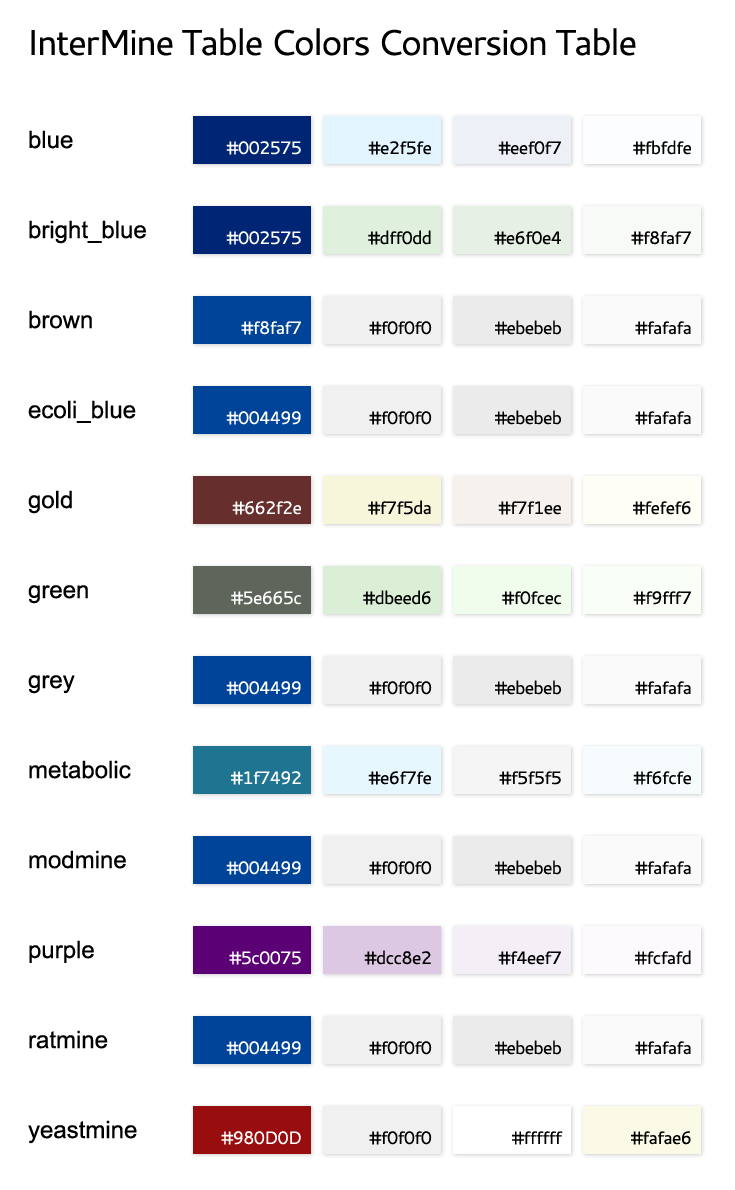
<style>
.page{position:relative;width:735px;height:1190px;background:#ffffff}
.page>*{position:absolute;margin:0}
.t1{font:36px "Cantarell-Regular";letter-spacing:-0.05em;color:#000000}
.t2{font:24px/30px "ArialMT";color:#000000}
.t3{font:18px "Cantarell-Regular";letter-spacing:-0.05em;color:#ffffff}
.t4{font:18px "Cantarell-Regular";letter-spacing:-0.05em;color:#000000}
</style>
<div class="page">
<p class="t1" style="left:31px;top:28px;width:605px;height:28px">InterMine Table Colors Conversion Table</p>
<p class="t2" style="left:28px;top:130px;width:118px;height:1014px">blue<br><br><br>bright_blue<br><br><br>brown<br><br><br>ecoli_blue<br><br><br>gold<br><br><br>green<br><br><br>grey<br><br><br>metabolic<br><br><br>modmine<br><br><br>purple<br><br><br>ratmine<br><br><br>yeastmine</p>
<p class="t3" style="left:226px;top:141px;width:75px;height:14px">#002575</p>
<p class="t4" style="left:368px;top:141px;width:63px;height:14px">#e2f5fe</p>
<p class="t4" style="left:498px;top:141px;width:63px;height:14px">#eef0f7</p>
<p class="t4" style="left:633px;top:140px;width:58px;height:15px">#fbfdfe</p>
<p class="t3" style="left:226px;top:231px;width:75px;height:14px">#002575</p>
<p class="t4" style="left:368px;top:230px;width:63px;height:15px">#dff0dd</p>
<p class="t4" style="left:494px;top:231px;width:67px;height:14px">#e6f0e4</p>
<p class="t4" style="left:631px;top:231px;width:60px;height:14px">#f8faf7</p>
<p class="t3" style="left:241px;top:321px;width:60px;height:14px">#f8faf7</p>
<p class="t4" style="left:369px;top:321px;width:63px;height:14px">#f0f0f0</p>
<p class="t4" style="left:495px;top:320px;width:66px;height:15px">#ebebeb</p>
<p class="t4" style="left:635px;top:321px;width:56px;height:14px">#fafafa</p>
<p class="t3" style="left:226px;top:411px;width:75px;height:14px">#004499</p>
<p class="t4" style="left:369px;top:411px;width:63px;height:14px">#f0f0f0</p>
<p class="t4" style="left:495px;top:410px;width:66px;height:15px">#ebebeb</p>
<p class="t4" style="left:635px;top:411px;width:56px;height:14px">#fafafa</p>
<p class="t3" style="left:232px;top:501px;width:69px;height:14px">#662f2e</p>
<p class="t4" style="left:368px;top:500px;width:63px;height:15px">#f7f5da</p>
<p class="t4" style="left:498px;top:501px;width:63px;height:14px">#f7f1ee</p>
<p class="t4" style="left:633px;top:501px;width:58px;height:14px">#fefef6</p>
<p class="t3" style="left:231px;top:591px;width:70px;height:14px">#5e665c</p>
<p class="t4" style="left:363px;top:590px;width:68px;height:15px">#dbeed6</p>
<p class="t4" style="left:502px;top:591px;width:59px;height:14px">#f0fcec</p>
<p class="t4" style="left:633px;top:591px;width:58px;height:14px">#f9fff7</p>
<p class="t3" style="left:226px;top:681px;width:75px;height:14px">#004499</p>
<p class="t4" style="left:369px;top:681px;width:63px;height:14px">#f0f0f0</p>
<p class="t4" style="left:495px;top:680px;width:66px;height:15px">#ebebeb</p>
<p class="t4" style="left:635px;top:681px;width:56px;height:14px">#fafafa</p>
<p class="t3" style="left:231px;top:771px;width:70px;height:14px">#1f7492</p>
<p class="t4" style="left:368px;top:771px;width:63px;height:14px">#e6f7fe</p>
<p class="t4" style="left:499px;top:771px;width:62px;height:14px">#f5f5f5</p>
<p class="t4" style="left:633px;top:771px;width:58px;height:14px">#f6fcfe</p>
<p class="t3" style="left:226px;top:861px;width:75px;height:14px">#004499</p>
<p class="t4" style="left:369px;top:861px;width:63px;height:14px">#f0f0f0</p>
<p class="t4" style="left:495px;top:860px;width:66px;height:15px">#ebebeb</p>
<p class="t4" style="left:635px;top:861px;width:56px;height:14px">#fafafa</p>
<p class="t3" style="left:229px;top:951px;width:72px;height:14px">#5c0075</p>
<p class="t4" style="left:364px;top:950px;width:67px;height:15px">#dcc8e2</p>
<p class="t4" style="left:498px;top:951px;width:63px;height:14px">#f4eef7</p>
<p class="t4" style="left:635px;top:950px;width:56px;height:15px">#fcfafd</p>
<p class="t3" style="left:226px;top:1041px;width:75px;height:14px">#004499</p>
<p class="t4" style="left:369px;top:1041px;width:63px;height:14px">#f0f0f0</p>
<p class="t4" style="left:495px;top:1040px;width:66px;height:15px">#ebebeb</p>
<p class="t4" style="left:635px;top:1041px;width:56px;height:14px">#fafafa</p>
<p class="t3" style="left:221px;top:1131px;width:80px;height:14px">#980D0D</p>
<p class="t4" style="left:369px;top:1131px;width:63px;height:14px">#f0f0f0</p>
<p class="t4" style="left:512px;top:1131px;width:51px;height:14px">#ffffff</p>
<p class="t4" style="left:631px;top:1131px;width:60px;height:14px">#fafae6</p>
</div>
